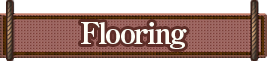
<style>
.page{position:relative;width:267px;height:61px;background:#ffffff}
.page>*{position:absolute;margin:0}
.t1{font:30px "RyuminPro-ExBold";letter-spacing:-0.08em;color:#fffff7}
</style>
<div class="page">
<p class="t1" style="left:81px;top:22px;width:106px;height:27px">Flooring</p>
</div>
